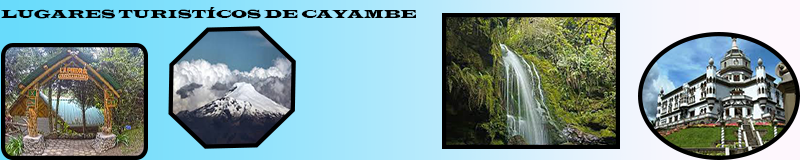
<style>
.page{position:relative;width:800px;height:160px}
.page>*{position:absolute;margin:0}
.t1{font:12px "LatinWide";letter-spacing:-0.025em;color:#000000}
</style>
<div class="page">
<p class="t1" style="left:1px;top:7px;width:415px;height:12px">LUGARES TURISTÍCOS DE CAYAMBE</p>
</div>
